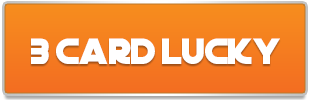
<style>
.page{position:relative;width:310px;height:100px}
.page>*{position:absolute;margin:0}
.t1{font:36px "DeathStar";color:#ffffff}
</style>
<div class="page">
<p class="t1" style="left:31px;top:38px;width:249px;height:26px">3 Card lucky</p>
</div>
